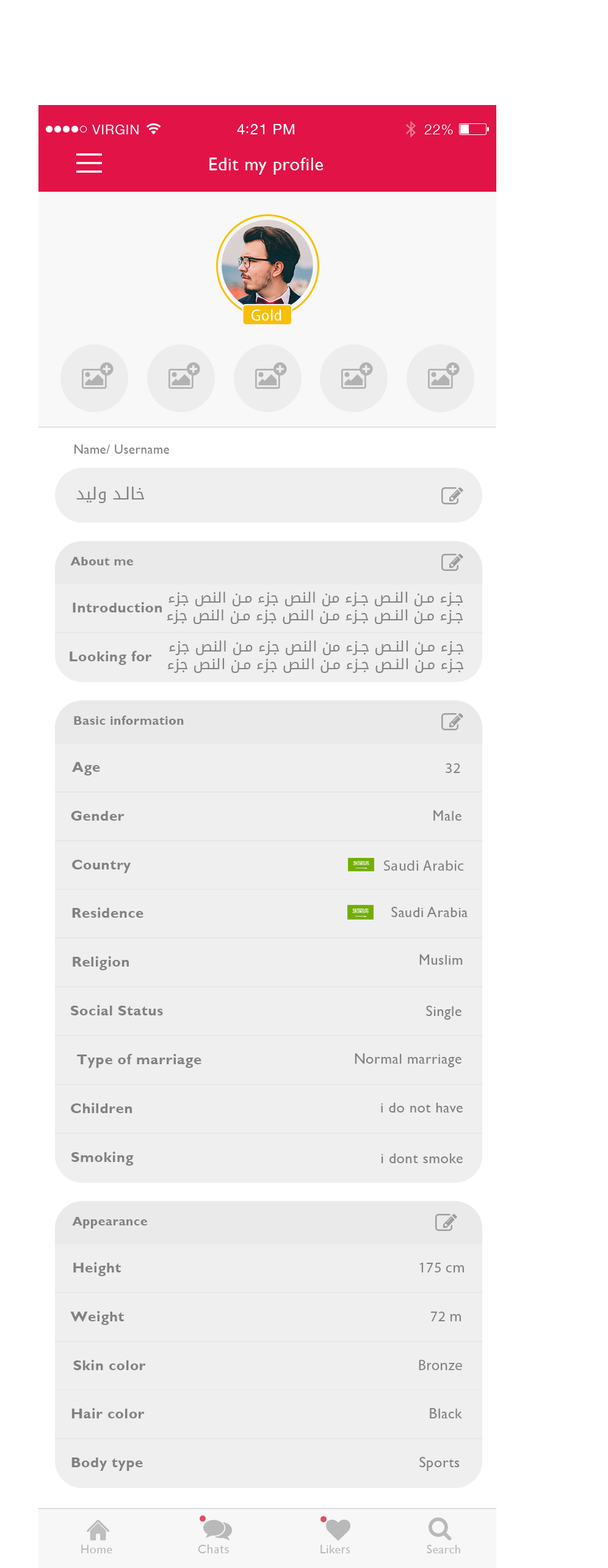
<style>
.page{position:relative;width:608px;height:1568px;background:#ffffff}
.page>*{position:absolute;margin:0}
.t1{font:18.3px "GillSans";letter-spacing:0.029em;color:#ffffff}
.t2{font:15.6px "MyriadPro-Regular";letter-spacing:0.029em;color:#ffffff;scale:0.96 1}
.t3{font:12.7px "GillSans";letter-spacing:0.029em;color:#828282}
.t4{font:16.5px "DroidArabicKufi";letter-spacing:0.029em;color:#828282}
.t5{font:12.7px "GillSans-Bold";letter-spacing:0.029em;color:#828282}
.t6{font:14.7px "DroidArabicKufi";letter-spacing:0.029em;color:#828282}
.t7{font:14.7px "GillSans-Bold";letter-spacing:0.029em;color:#828282}
.t8{font:14.7px "GillSans";letter-spacing:0.029em;color:#828282}
.t9{font:12.2px "GillSans";letter-spacing:0.029em;color:#b9b9b9}
.t10{font:12.2px "MyriadPro-Regular";letter-spacing:0.029em;color:#b9b9b9}
</style>
<div class="page">
<p class="t1" style="left:209px;top:158px;width:114px;height:17px">Edit my profile</p>
<p class="t2" style="left:252px;top:310px;width:29px;height:11px">Gold</p>
<p class="t3" style="left:74px;top:445px;width:95px;height:9px">Name/ Username</p>
<p class="t4" style="left:76px;top:487px;width:68px;height:16px">خالد وليد</p>
<p class="t5" style="left:70px;top:557px;width:63px;height:8px">About me</p>
<p class="t6" style="left:167px;top:592px;width:296px;height:32px;text-align:right">جزء من النص جزء من النص جزء من النص جزء<br>  جزء من النص جزء من النص جزء من النص جزء</p>
<p class="t7" style="left:73px;top:602px;width:89px;height:10px">Introduction</p>
<p class="t6" style="left:167px;top:641px;width:296px;height:32px;text-align:right">جزء من النص جزء من النص جزء من النص جزء<br>  جزء من النص جزء من النص جزء من النص جزء</p>
<p class="t7" style="left:70px;top:651px;width:82px;height:14px">Looking for</p>
<p class="t5" style="left:74px;top:716px;width:110px;height:9px">Basic information</p>
<p class="t7" style="left:72px;top:762px;width:28px;height:13px">Age</p>
<p class="t8" style="left:446px;top:763px;width:14px;height:10px">32</p>
<p class="t7" style="left:71px;top:811px;width:54px;height:10px">Gender</p>
<p class="t8" style="left:434px;top:810px;width:28px;height:11px">Male</p>
<p class="t7" style="left:72px;top:860px;width:59px;height:13px">Country</p>
<p class="t8" style="left:383px;top:860px;width:81px;height:11px">Saudi Arabic</p>
<p class="t7" style="left:72px;top:907px;width:71px;height:11px">Residence</p>
<p class="t8" style="left:391px;top:907px;width:77px;height:10px">Saudi Arabia</p>
<p class="t7" style="left:73px;top:956px;width:56px;height:14px">Religion</p>
<p class="t8" style="left:419px;top:954px;width:44px;height:11px">Muslim</p>
<p class="t7" style="left:71px;top:1005px;width:92px;height:10px">Social Status</p>
<p class="t8" style="left:426px;top:1006px;width:36px;height:14px">Single</p>
<p class="t7" style="left:77px;top:1054px;width:124px;height:14px">Type of marriage</p>
<p class="t8" style="left:355px;top:1053px;width:107px;height:14px">Normal marriage</p>
<p class="t7" style="left:71px;top:1103px;width:61px;height:10px">Children</p>
<p class="t8" style="left:381px;top:1103px;width:82px;height:9px">i do not have</p>
<p class="t7" style="left:71px;top:1152px;width:63px;height:14px">Smoking</p>
<p class="t8" style="left:381px;top:1153px;width:82px;height:10px">i dont smoke</p>
<p class="t5" style="left:72px;top:1217px;width:75px;height:12px">Appearance</p>
<p class="t7" style="left:73px;top:1262px;width:48px;height:14px">Height</p>
<p class="t8" style="left:419px;top:1263px;width:45px;height:9px">175 cm</p>
<p class="t7" style="left:70px;top:1311px;width:54px;height:14px">Weight</p>
<p class="t8" style="left:430px;top:1312px;width:31px;height:9px">72 m</p>
<p class="t7" style="left:73px;top:1360px;width:73px;height:10px">Skin color</p>
<p class="t8" style="left:419px;top:1360px;width:43px;height:10px">Bronze</p>
<p class="t7" style="left:71px;top:1408px;width:74px;height:10px">Hair color</p>
<p class="t8" style="left:430px;top:1408px;width:32px;height:10px">Black</p>
<p class="t7" style="left:71px;top:1457px;width:72px;height:14px">Body type</p>
<p class="t8" style="left:419px;top:1457px;width:41px;height:14px">Sports</p>
<p class="t9" style="left:81px;top:1545px;width:31px;height:8px">Home</p>
<p class="t10" style="left:198px;top:1544px;width:31px;height:9px"><span class="t9">C</span>hats</p>
<p class="t9" style="left:321px;top:1545px;width:29px;height:8px">Like<span class="t10">rs</span></p>
<p class="t9" style="left:427px;top:1545px;width:33px;height:8px">Search</p>
</div>
